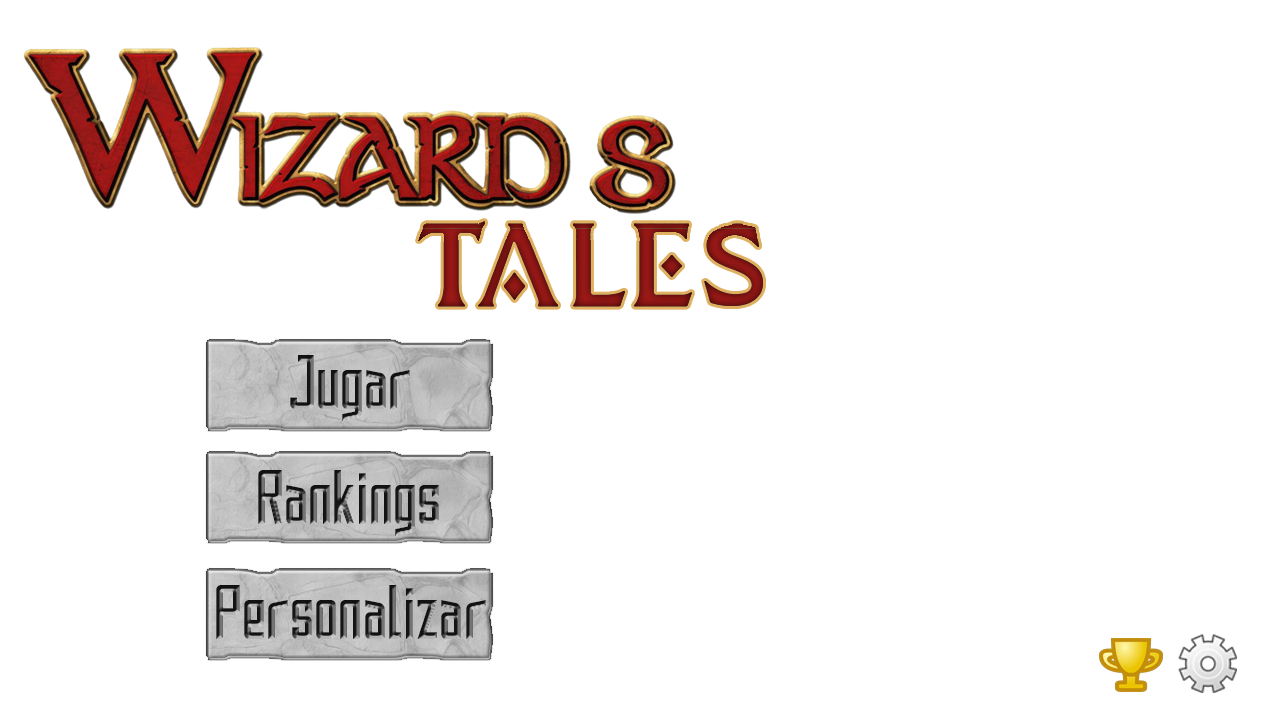
<style>
.page{position:relative;width:1280px;height:720px;background:#ffffff}
.page>*{position:absolute;margin:0}
.t1{font:68px "SAOUI-Regular"}
</style>
<div class="page">
<p class="t1" style="left:290px;top:355px;width:120px;height:66px">Jugar</p>
<p class="t1" style="left:258px;top:470px;width:181px;height:66px">Rankings</p>
<p class="t1" style="left:216px;top:585px;width:270px;height:54px">Personalizar</p>
</div>
